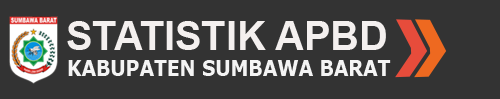
<style>
.page{position:relative;width:500px;height:99px;background:#333333}
.page>*{position:absolute;margin:0}
.t1{font:39.7px "Arial-BoldMT";color:#f4f0ef}
.t2{font:21.7px "Verdana-Bold";color:#f4f4f4;scale:0.87 1}
</style>
<div class="page">
<p class="t1" style="left:67px;top:21px;width:319px;height:29px">STATISTIK APBD</p>
<p class="t2" style="left:68px;top:60px;width:323px;height:16px">KABUPATEN SUMBAWA BARAT</p>
</div>
